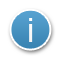
<style>
.page{position:relative;width:60px;height:60px;background:#ffffff}
.page>*{position:absolute;margin:0}
.t1{font:33.4px "Helvetica";color:#ffffff}
</style>
<div class="page">
<p class="t1" style="left:29px;top:18px;width:4px;height:24px">i</p>
</div>
